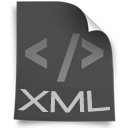
<style>
.page{position:relative;width:128px;height:128px;background:#ffffff}
.page>*{position:absolute;margin:0}
.t1{font:29.3px "PirulenRg-Regular";color:#c2c2c2}
</style>
<div class="page">
<p class="t1" style="left:18px;top:88px;width:92px;height:25px">XML</p>
</div>
